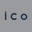
<style>
.page{position:relative;width:32px;height:32px;background:#999b9f}
.page>*{position:absolute;margin:0}
.t1{font:15px "Almondia-Bold";letter-spacing:0.2em;color:#1c314a}
</style>
<div class="page">
<p class="t1" style="left:4px;top:11px;width:24px;height:9px">ico</p>
</div>
